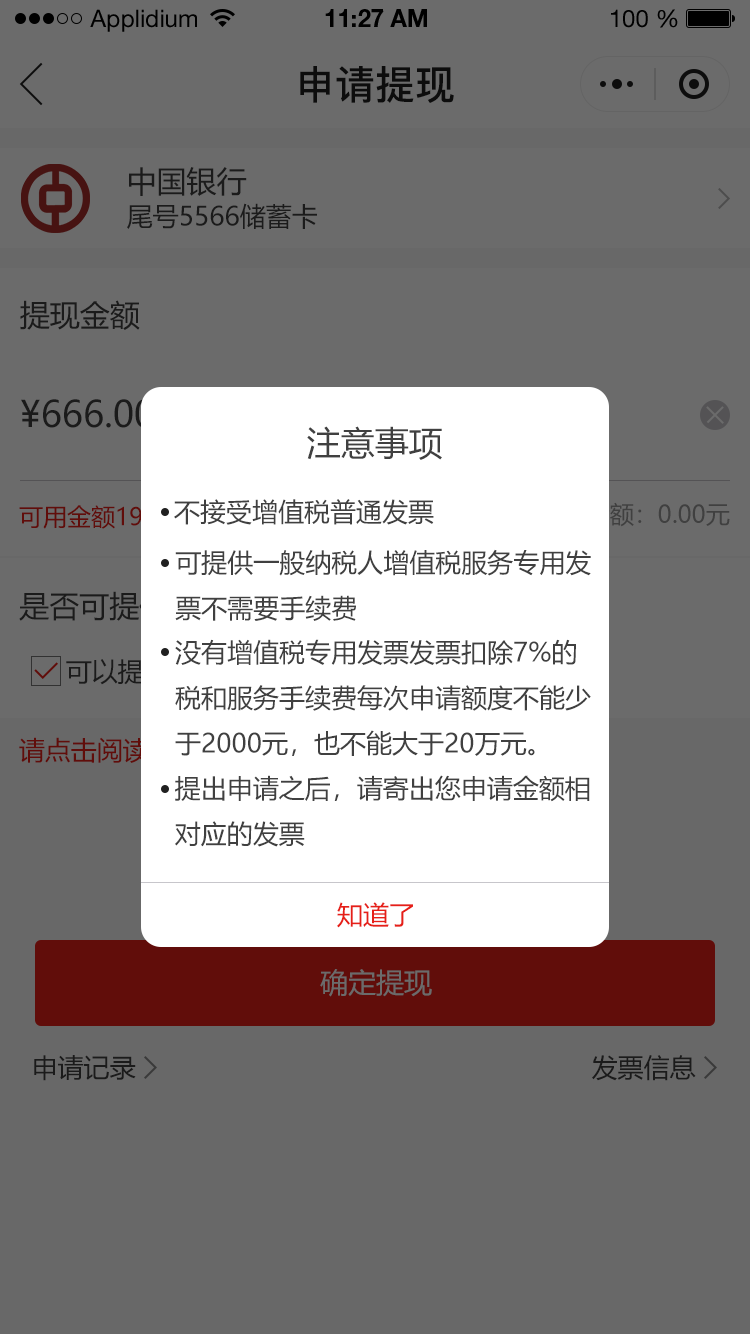
<style>
.page{position:relative;width:750px;height:1334px;background:#6b6b6b}
.page>*{position:absolute;margin:0}
.t1{font:24px "HelveticaNeueLTStd-Roman";color:#000000}
.t2{font:24px "HelveticaNeueLTStd-Bd";color:#000000}
.t3{font:40px "PingFang-SC-Bold";color:#202020;text-transform:uppercase}
.t4{font:30px "MicrosoftYaHei";color:#1b1b1b;text-transform:uppercase}
.t5{font:26px "MicrosoftYaHei";color:#1b1b1b;text-transform:uppercase}
.t6{font:36px "MicrosoftYaHei";color:#1b1b1b;text-transform:uppercase}
.t7{font:34px "MicrosoftYaHei";color:#404040;text-transform:uppercase}
.t8{font:26px "MicrosoftYaHei";color:#404040;text-transform:uppercase}
.t9{font:26px "MicrosoftYaHei";color:#e61f18;text-transform:uppercase}
.t10{font:28px "MicrosoftYaHei";color:#6b6b6b;text-transform:uppercase}
</style>
<div class="page">
<p class="t1" style="left:90px;top:9px;width:107px;height:23px">Applidium</p>
<p class="t2" style="left:325px;top:9px;width:102px;height:18px">11:27 AM</p>
<p class="t1" style="left:611px;top:9px;width:67px;height:19px">100 %</p>
<p class="t3" style="left:300px;top:66px;width:154px;height:37px">申请提现</p>
<p class="t4" style="left:129px;top:167px;width:118px;height:29px">中国银行</p>
<p class="t5" style="left:127px;top:203px;width:190px;height:26px">尾号5566储蓄卡</p>
<p class="t4" style="left:20px;top:300px;width:120px;height:30px">提现金额</p>
<p class="t6" style="left:21px;top:399px;width:133px;height:29px">¥666.00</p>
<p class="t7" style="left:307px;top:426px;width:135px;height:34px">注意事项</p>
<p class="t8" style="left:174px;top:499px;width:260px;height:26px">不接受增值税普通发票</p>
<p class="t8" style="left:175px;top:549px;width:416px;height:72px">可提供一般纳税人增值税服务专用发<br>票不需要手续费</p>
<p class="t8" style="left:175px;top:639px;width:416px;height:117px">没有增值税专用发票发票扣除7%的<br>税和服务手续费每次申请额度不能少<br>于2000元，也不能大于20万元。</p>
<p class="t8" style="left:175px;top:775px;width:415px;height:72px">提出申请之后，请寄出您申请金额相<br>对应的发票</p>
<p class="t9" style="left:337px;top:902px;width:76px;height:26px">知道了</p>
<p class="t10" style="left:320px;top:969px;width:112px;height:28px">确定提现</p>
<p class="t5" style="left:34px;top:1055px;width:102px;height:26px">申请记录</p>
<p class="t5" style="left:592px;top:1055px;width:104px;height:26px">发票信息</p>
</div>
